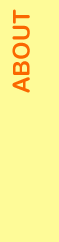
<style>
.page{position:relative;width:59px;height:242px;background:#fefb98}
.page>*{position:absolute;margin:0}
.t1{font:23.2px "ArialRoundedMTBold";color:#fa6700}
</style>
<div class="page">
<p class="t1" style="left:12px;top:9px;width:18px;height:84px;rotate:-90deg">ABOUT</p>
</div>
